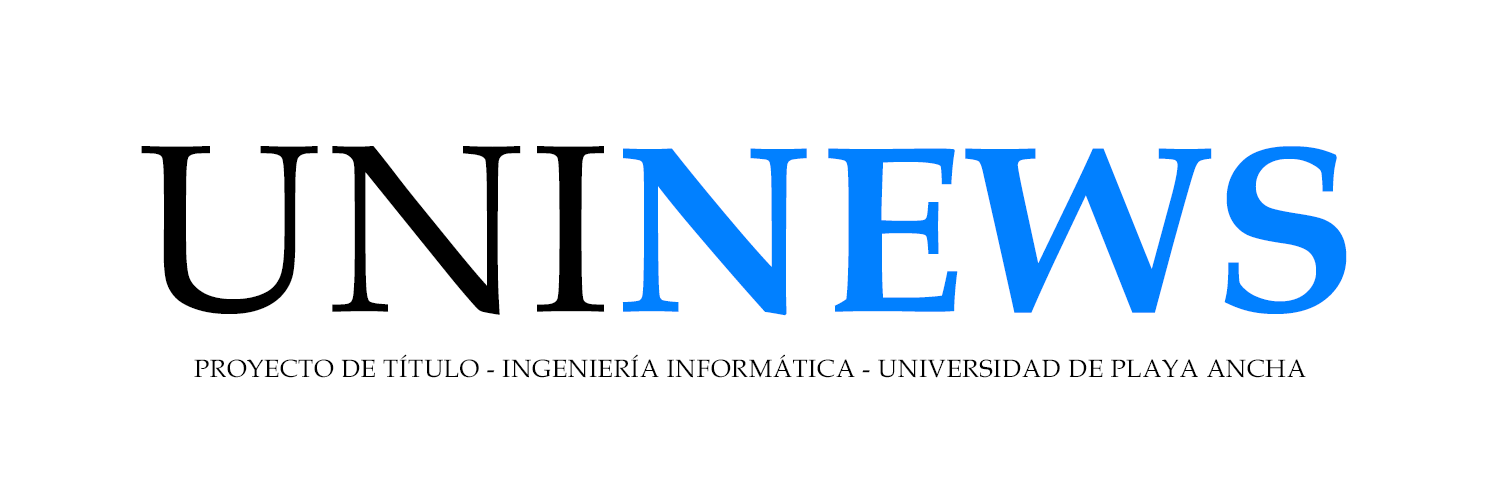
<style>
.page{position:relative;width:1500px;height:500px;background:#ffffff}
.page>*{position:absolute;margin:0}
.t1{font:238.4px "BookAntiqua-Bold";letter-spacing:0.02em;color:#0180ff}
.t2{font:238.4px "BookAntiqua";letter-spacing:0.02em;color:#000000}
.t3{font:25px "BookAntiqua";letter-spacing:0.02em;color:#000000}
</style>
<div class="page">
<p class="t1" style="left:141px;top:146px;width:1206px;height:170px"><span class="t2">UNI</span>NEWS</p>
<p class="t3" style="left:194px;top:354px;width:1112px;height:24px">PROYECTO DE TÍTULO - INGENIERÍA INFORMÁTICA - UNIVERSIDAD DE PLAYA ANCHA</p>
</div>
